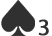
<style>
.page{position:relative;width:52px;height:36px;background:#ffffff}
.page>*{position:absolute;margin:0}
.t1{font:23.4px "MyriadPro-Regular";letter-spacing:-0.1em;color:#303030;font-weight:bold}
</style>
<div class="page">
<p class="t1" style="left:38px;top:19px;width:11px;height:17px">3</p>
</div>
